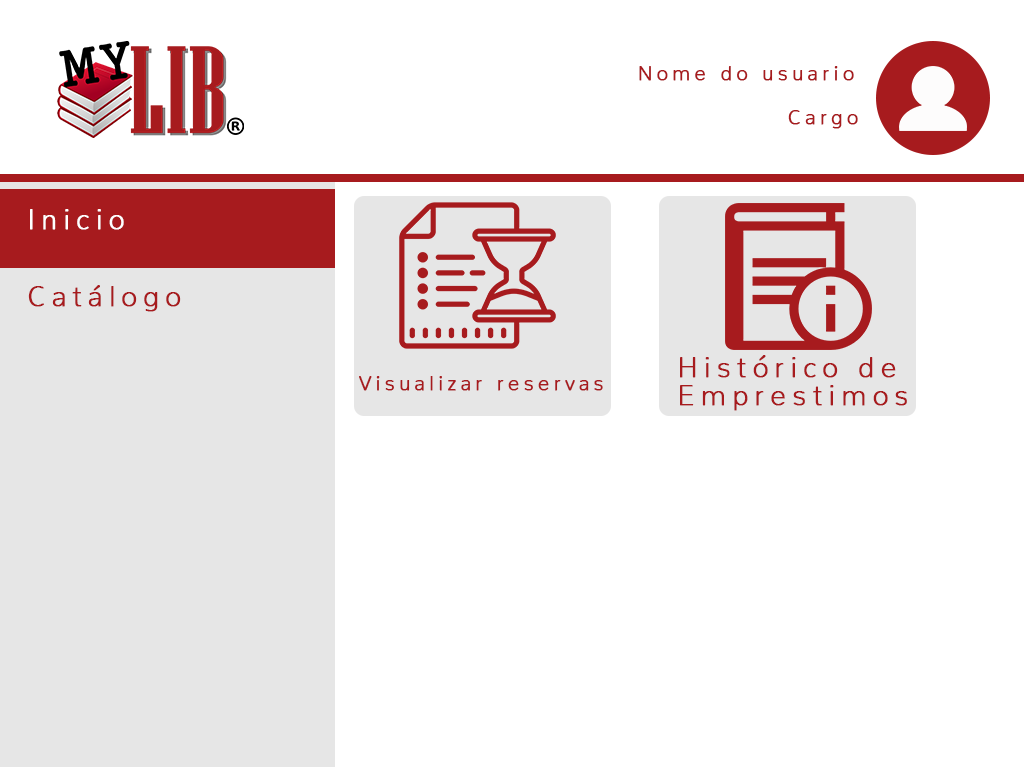
<style>
.page{position:relative;width:1024px;height:768px;background:#ffffff}
.page>*{position:absolute;margin:0}
.t1{font:20px "Nunito-ExtraLight";letter-spacing:0.2em;color:#a71b1e;font-weight:bold}
.t2{font:28px "Nunito-ExtraLight";letter-spacing:0.2em;color:#ffffff;font-weight:bold}
.t3{font:28px "Nunito-ExtraLight";letter-spacing:0.2em;color:#a71b1e;font-weight:bold}
.t4{font:19.9px "Nunito-ExtraLight";letter-spacing:0.2em;color:#a71b1e;font-weight:bold}
</style>
<div class="page">
<p class="t1" style="left:639px;top:66px;width:215px;height:15px">Nome do usuario</p>
<p class="t1" style="left:788px;top:110px;width:70px;height:19px">Cargo</p>
<p class="t2" style="left:30px;top:209px;width:94px;height:21px">Inicio</p>
<p class="t3" style="left:28px;top:285px;width:153px;height:27px">Catálogo</p>
<p class="t3" style="left:680px;top:355px;width:216px;height:23px">Histórico de</p>
<p class="t4" style="left:359px;top:376px;width:244px;height:15px">Visualizar reservas</p>
<p class="t3" style="left:680px;top:385px;width:227px;height:26px">Emprestimos</p>
</div>
